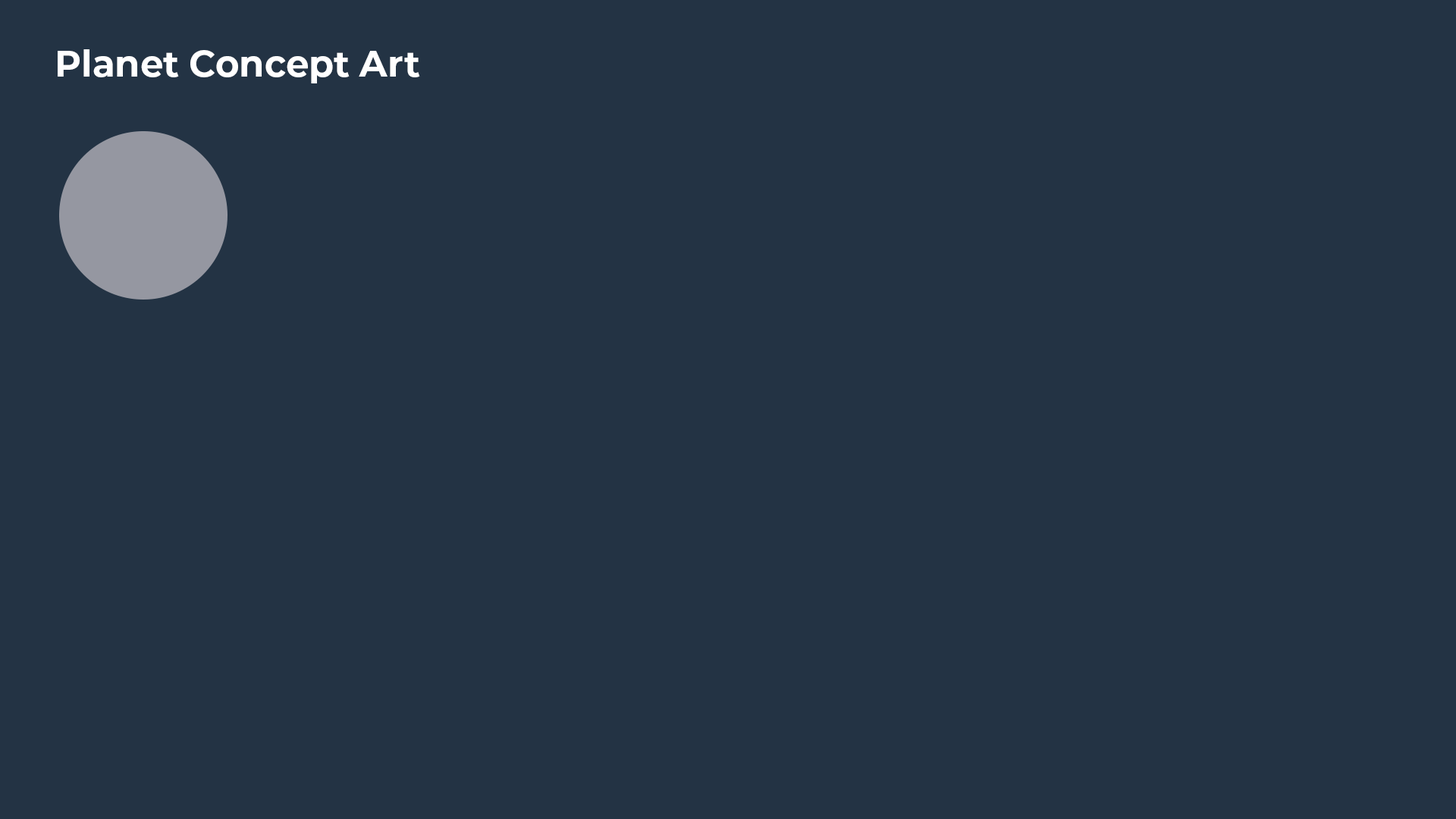
<style>
.page{position:relative;width:1456px;height:819px;background:#233344}
.page>*{position:absolute;margin:0}
.t1{font:36.4px "Montserrat-Bold";color:#ffffff}
.t2{font:36.4px "Montserrat-Bold";color:#233344}
</style>
<div class="page">
<p class="t1" style="left:58px;top:49px;width:565px;height:34px">Planet Concept Art<span class="t2">rem Ipsum</span></p>
</div>
